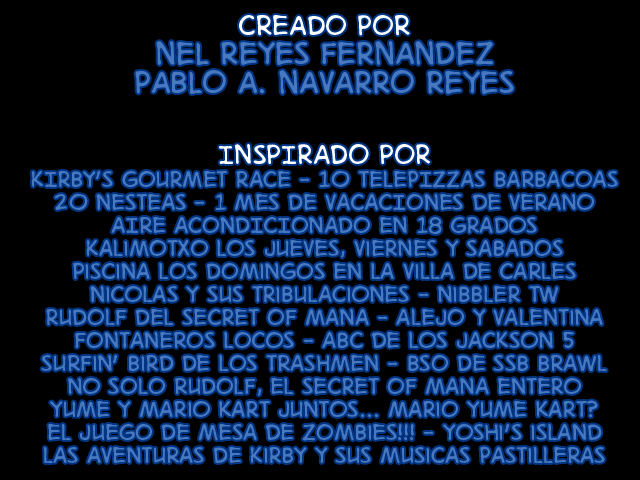
<style>
.page{position:relative;width:640px;height:480px;background:#000000}
.page>*{position:absolute;margin:0}
.t1{font:29px/23px "DigitalStrip.BB";color:#4878c0}
.t2{font:36px "DigitalStrip.BB";color:#ffffff}
.t3{font:40px/29px "DigitalStrip.BB";color:#4878c0}
.t4{font:35px/13px "DigitalStrip.BB";color:#ffffff}
</style>
<div class="page">
<p class="t1" style="left:32px;top:15px;width:586px;height:449px;text-align:center"><span class="t2">CREADO POR<br></span><span class="t3">NEL REYES FERNANDEZ<br>PABLO A. NAVARRO REYES<br><br><br></span><span class="t4">INSPIRADO POR <br></span>KIRBY’S GOURMET RACE - 10 TELEPIZZAS BARBACOAS<br>20 NESTEAS - 1 MES DE VACACIONES DE VERANO<br>AIRE ACONDICIONADO EN 18 grados<br>kalimotxo los jueves, viernes y sabados<br>piscina los domingos en la villa de carles<br>nicolas y sus tribulaciones - nibbler tw<br>rudolf del secret of mana - alejo y valentina<br>fontaneros locos - abc de los jackson 5<br>surfin’ bird de los trashmen - bso de ssb brawl<br>no solo rudolf, el secret of mana entero<br>yume y mario kart juntos... mario yume kart?<br>el juego de mesa de zombies!!! - yoshi’s island<br>las aventuras de kirby y sus musicas pastilleras</p>
</div>
